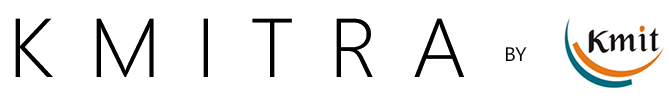
<style>
.page{position:relative;width:669px;height:104px;background:#ffffff}
.page>*{position:absolute;margin:0}
.t1{font:83.3px "SegoeWP-Light";letter-spacing:0.4em;color:#000000;text-transform:uppercase;scale:1.04 1}
.t2{font:83.3px "SegoeWP-Light";color:#000000;text-transform:uppercase;scale:1.04 1}
.t3{font:19.4px "SegoeWP";color:#000000;text-transform:uppercase;scale:1.04 1}
</style>
<div class="page">
<p class="t1" style="left:15px;top:18px;width:449px;height:59px">KMITR<span class="t2">a</span></p>
<p class="t3" style="left:505px;top:47px;width:22px;height:15px">by</p>
</div>
